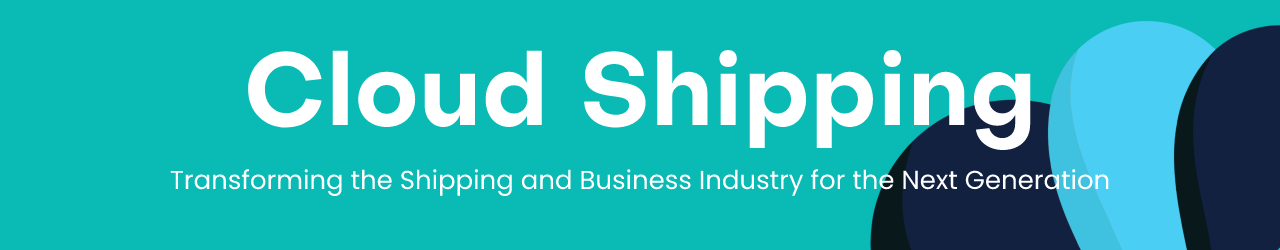
<style>
.page{position:relative;width:1280px;height:250px;background:#0abab5}
.page>*{position:absolute;margin:0}
.t1{font:100px "Subjectivity-Bold";color:#ffffff}
.t2{font:26px "Poppins-Regular";color:#ffffff}
</style>
<div class="page">
<p class="t1" style="left:248px;top:50px;width:783px;height:100px">Cloud Shipping</p>
<p class="t2" style="left:170px;top:169px;width:939px;height:28px">Transforming the Shipping and Business Industry for the Next Generation</p>
</div>
